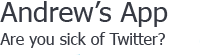
<style>
.page{position:relative;width:200px;height:55px;background:#ffffff}
.page>*{position:absolute;margin:0}
.t1{font:16px/24px "Tahoma";color:#363942}
.t2{font:26.6px/20px "Tahoma";color:#363942;scale:1.05 1}
</style>
<div class="page">
<p class="t1" style="left:0px;top:1px;width:168px;height:47px"><span class="t2">Andrew’s App<br></span>Are you sick of Twitter?</p>
</div>
